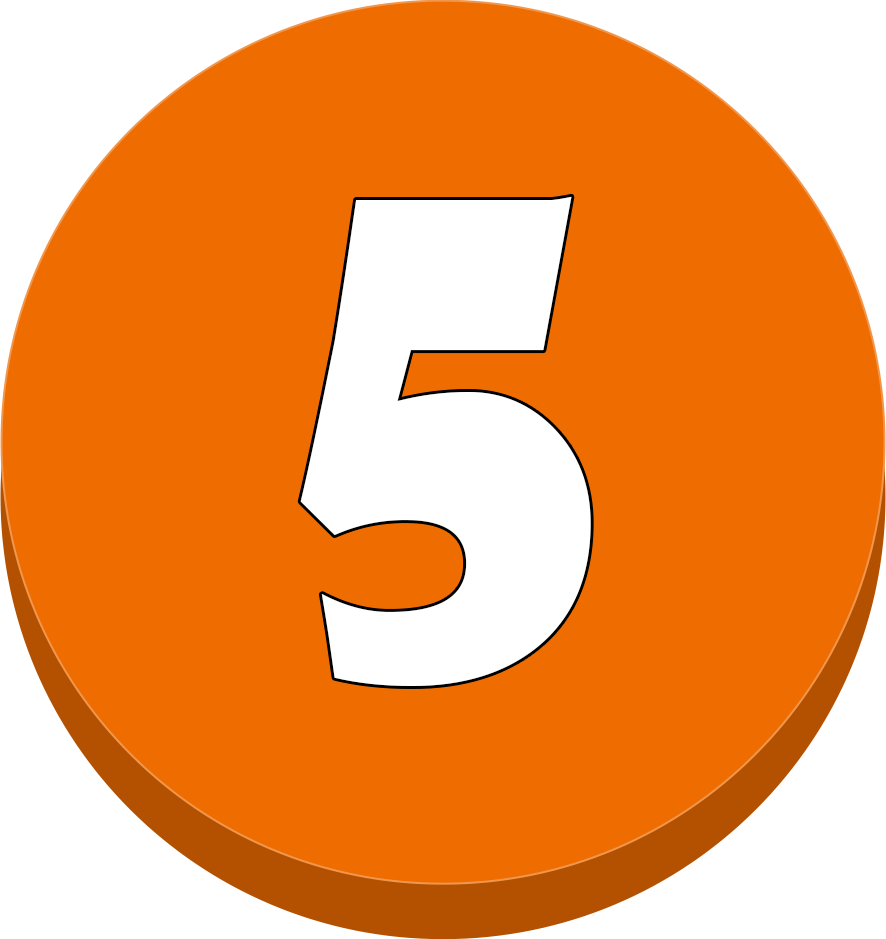
<style>
.page{position:relative;width:886px;height:939px;background:#ef6c00}
.page>*{position:absolute;margin:0}
.t1{font:637.2px "ShowcardGothic-Reg";color:#ffffff}
</style>
<div class="page">
<p class="t1" style="left:300px;top:196px;width:291px;height:490px">5</p>
</div>
